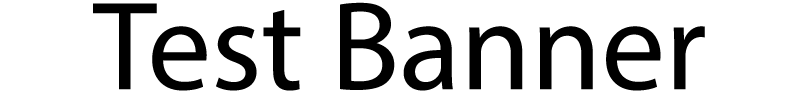
<style>
.page{position:relative;width:800px;height:100px;background:#ffffff}
.page>*{position:absolute;margin:0}
.t1{font:127px "MyriadPro-Regular";color:#000000}
</style>
<div class="page">
<p class="t1" style="left:93px;top:2px;width:612px;height:89px">Test Banner</p>
</div>
